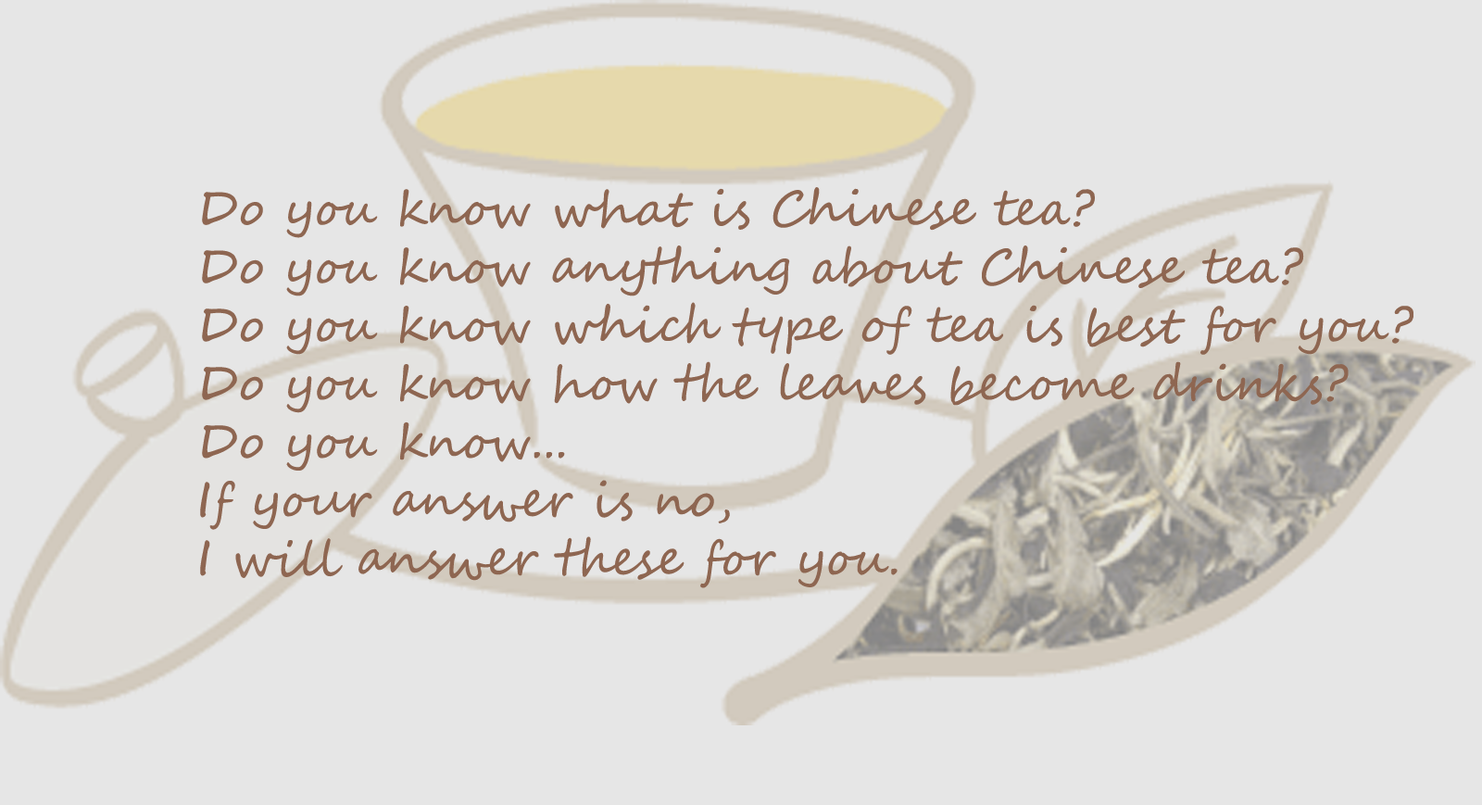
<style>
.page{position:relative;width:1482px;height:805px;background:#e6e6e6}
.page>*{position:absolute;margin:0}
.t1{font:48.6px "SegoeScript";color:#8e6651}
</style>
<div class="page">
<p class="t1" style="left:200px;top:187px;width:1213px;height:401px">Do you know what is Chinese tea?<br>Do you know anything about Chinese tea?<br>Do you know which type of tea is best for you?<br>Do you know how the leaves become drinks?<br>Do you know...<br>If your answer is no,<br>I will answer these for you.</p>
</div>
